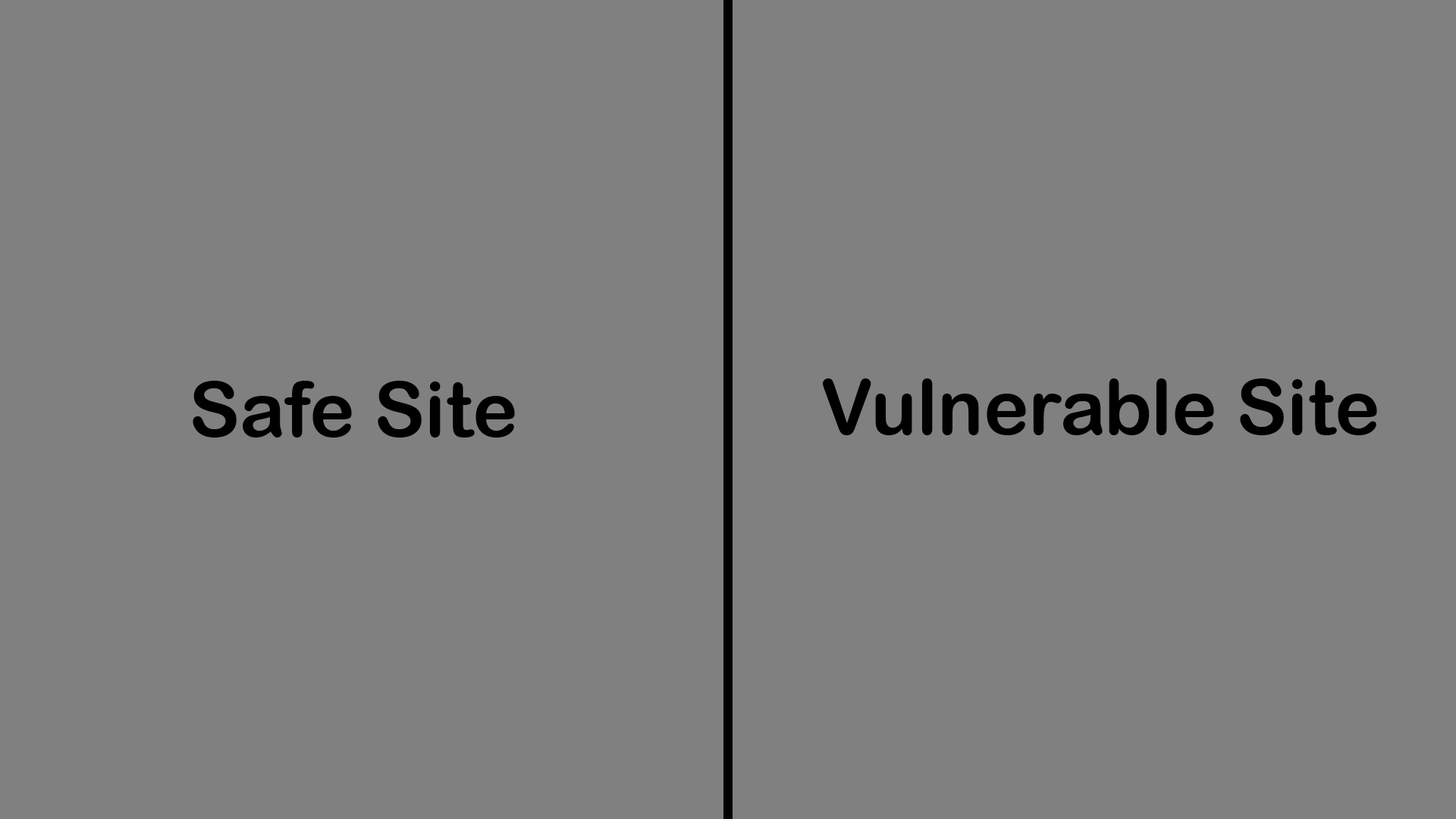
<style>
.page{position:relative;width:1456px;height:819px;background:#808080}
.page>*{position:absolute;margin:0}
.t1{font:76.3px "ArialRoundedMTBold";color:#000000}
</style>
<div class="page">
<p class="t1" style="left:193px;top:381px;width:322px;height:57px">Safe Site</p>
<p class="t1" style="left:823px;top:378px;width:554px;height:58px">Vulnerable Site</p>
</div>
